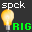
<style>
.page{position:relative;width:32px;height:32px;background:#333333}
.page>*{position:absolute;margin:0}
.t1{font:9px "Monaco";letter-spacing:0.06em;color:#ffffff}
.t2{font:9px "Monaco";letter-spacing:0.06em;color:#00ff18;font-weight:bold}
</style>
<div class="page">
<p class="t1" style="left:2px;top:1px;width:23px;height:9px">spck</p>
<p class="t2" style="left:13px;top:23px;width:18px;height:7px">RIG</p>
</div>
